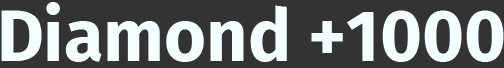
<style>
.page{position:relative;width:504px;height:68px;background:#333333}
.page>*{position:absolute;margin:0}
.t1{font:72px "FiraSans-Bold";color:#f4ffff}
</style>
<div class="page">
<p class="t1" style="left:1px;top:2px;width:503px;height:60px">Diamond +1000</p>
</div>
